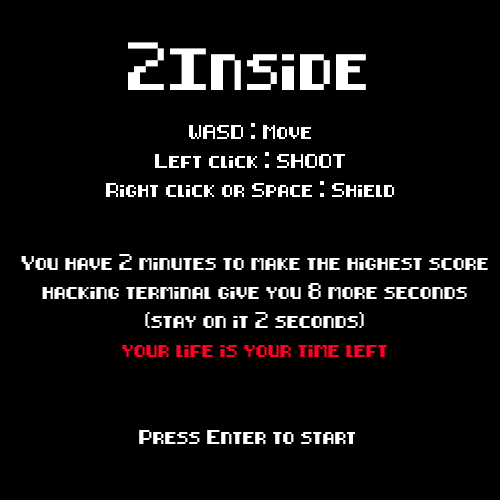
<style>
.page{position:relative;width:500px;height:500px;background:#000000}
.page>*{position:absolute;margin:0}
.t1{font:35.6px "8-bit-pusab";color:#ffffff}
.t2{font:12px "8-bit-pusab";color:#ffffff}
.t3{font:12px "8-bit-pusab";color:#ff002a}
</style>
<div class="page">
<p class="t1" style="left:128px;top:42px;width:238px;height:48px">2Inside</p>
<p class="t2" style="left:106px;top:123px;width:288px;height:74px;text-align:center">WASD : Move<br><br>Left click : SHOOT<br><br>Right click or Space : Shield</p>
<p class="t2" style="left:21px;top:254px;width:467px;height:103px;text-align:center">You have 2 minutes to make the highest score<br><br>hacking terminal give you 8 more seconds<br><br>(stay on it 2 seconds)<br><br><span class="t3">your life is your time left</span></p>
<p class="t2" style="left:139px;top:430px;width:216px;height:14px">Press Enter to start</p>
</div>
